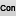
<style>
.page{position:relative;width:16px;height:16px}
.page>*{position:absolute;margin:0}
.t1{font:8.3px "ArialMT";color:#000000}
</style>
<div class="page">
<p class="t1" style="left:0px;top:5px;width:15px;height:6px">Con</p>
<p class="t1" style="left:0px;top:5px;width:15px;height:6px">Con</p>
</div>
